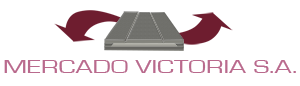
<style>
.page{position:relative;width:300px;height:86px;background:#ffffff}
.page>*{position:absolute;margin:0}
.t1{font:18.7px "EurostileRegular";color:#b96a8d;scale:1.51 1}
</style>
<div class="page">
<p class="t1" style="left:4px;top:60px;width:292px;height:13px">MERCADO VICTORIA S.A.</p>
</div>
